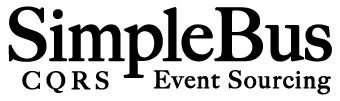
<style>
.page{position:relative;width:340px;height:101px;background:#ffffff}
.page>*{position:absolute;margin:0}
.t1{font:72px "BigCaslon-Medium";letter-spacing:-0.025em;color:#000000;font-weight:bold}
.t2{font:24px "BigCaslon-Medium";letter-spacing:0.2em;color:#000000;font-weight:bold}
.t3{font:24px "BigCaslon-Medium";letter-spacing:0.05em;color:#000000;font-weight:bold}
</style>
<div class="page">
<p class="t1" style="left:8px;top:6px;width:324px;height:72px">SimpleBus</p>
<p class="t2" style="left:22px;top:71px;width:87px;height:22px">CQRS</p>
<p class="t3" style="left:153px;top:70px;width:178px;height:25px">Event Sourcing</p>
</div>
